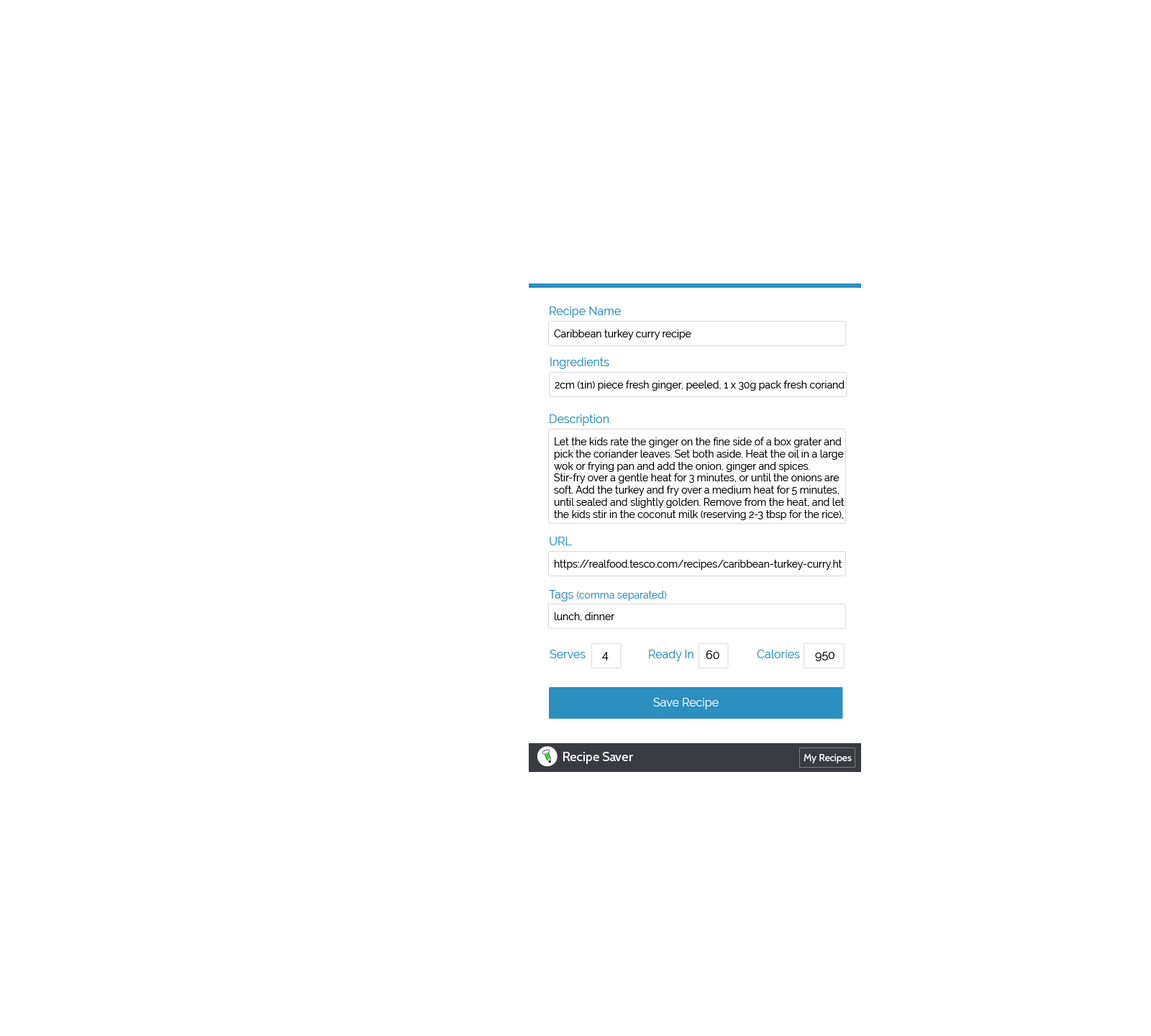
<style>
.page{position:relative;width:1151px;height:1036px;background:#ffffff}
.page>*{position:absolute;margin:0}
.t1{font:11.5px "Raleway-Regular";color:#2b90c0}
.t2{font:10.1px "Raleway-Regular";color:#000000}
.t3{font:10.1px "Raleway-Regular";color:#2b90c0}
.t4{font:11.5px "Raleway-Regular";color:#000000}
.t5{font:11.5px "Raleway-Regular";color:#ffffff}
.t6{font:12.9px "Cabin-Regular";color:#ffffff}
.t7{font:10.1px "Cabin-Regular";color:#ffffff}
</style>
<div class="page">
<p class="t1" style="left:550px;top:306px;width:71px;height:12px">Recipe Name</p>
<p class="t2" style="left:554px;top:329px;width:137px;height:11px">Caribbean turkey curry recipe</p>
<p class="t1" style="left:550px;top:358px;width:59px;height:11px">Ingredients</p>
<p class="t2" style="left:555px;top:381px;width:290px;height:10px">2cm (1in) piece fresh ginger, peeled, 1 x 30g pack fresh coriand</p>
<p class="t1" style="left:550px;top:414px;width:59px;height:12px">Description</p>
<p class="t2" style="left:554px;top:437px;width:291px;height:83px">Let the kids rate the ginger on the fine side of a box grater and <br>pick the coriander leaves. Set both aside. Heat the oil in a large <br>wok or frying pan and add the onion, ginger and spices. <br>Stir-fry over a gentle heat for 3 minutes, or until the onions are <br>soft. Add the turkey and fry over a medium heat for 5 minutes, <br>until sealed and slightly golden. Remove from the heat, and let <br>the kids stir in the coconut milk (reserving 2-3 tbsp for the rice),</p>
<p class="t1" style="left:550px;top:537px;width:22px;height:8px">URL</p>
<p class="t2" style="left:554px;top:560px;width:288px;height:10px">https://realfood.tesco.com/recipes/caribbean-turkey-curry.ht</p>
<p class="t3" style="left:549px;top:590px;width:118px;height:11px"><span class="t1">Tags </span>(comma separated)</p>
<p class="t2" style="left:555px;top:612px;width:60px;height:9px">lunch, dinner</p>
<p class="t1" style="left:550px;top:650px;width:36px;height:8px">Serves</p>
<p class="t4" style="left:602px;top:652px;width:7px;height:8px">4</p>
<p class="t1" style="left:649px;top:650px;width:45px;height:11px">Ready In</p>
<p class="t4" style="left:706px;top:650px;width:13px;height:9px">60</p>
<p class="t1" style="left:757px;top:650px;width:43px;height:8px">Calories</p>
<p class="t4" style="left:815px;top:652px;width:20px;height:9px">950</p>
<p class="t5" style="left:653px;top:698px;width:66px;height:11px">Save Recipe</p>
<p class="t6" style="left:563px;top:752px;width:70px;height:12px">Recipe Saver</p>
<p class="t7" style="left:804px;top:754px;width:48px;height:9px">My Recipes</p>
</div>
